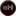
<style>
.page{position:relative;width:16px;height:16px;background:#1c0000}
.page>*{position:absolute;margin:0}
.t1{font:6.8px "BorisBlackBloxx";color:#616161}
</style>
<div class="page">
<p class="t1" style="left:3px;top:4px;width:10px;height:6px">nH</p>
</div>
